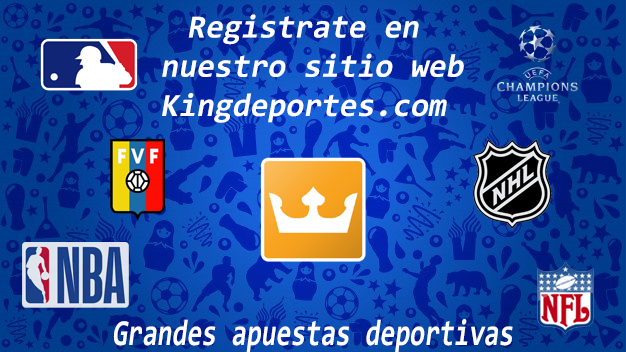
<style>
.page{position:relative;width:626px;height:352px}
.page>*{position:absolute;margin:0}
.t1{font:32.4px/39.2px "Consolas-Bold";color:#ffffff;font-style:italic}
.t2{font:32.4px/39.2px "Consolas-Bold";color:#010100;font-style:italic}
.t3{font:36.8px "Consolas-Bold";color:#ffffff;font-style:italic;scale:0.73 1}
</style>
<div class="page">
<p class="t1" style="left:162px;top:14px;width:302px;height:109px;text-align:center">Registrate en <br>nuestro sitio web<br>Kingdeportes.com<span class="t2"></span></p>
<p class="t3" style="left:113px;top:319px;width:400px;height:34px">Grandes apuestas deportivas</p>
</div>
